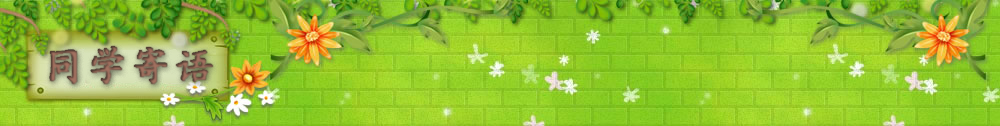
<style>
.page{position:relative;width:1000px;height:126px}
.page>*{position:absolute;margin:0}
.t1{font:40px "¿¬Ìå";letter-spacing:0.14em;font-weight:bold;scale:0.96 1}
</style>
<div class="page">
<p class="t1" style="left:50px;top:46px;width:163px;height:38px">同学寄语</p>
</div>
